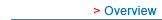
<style>
.page{position:relative;width:162px;height:20px;background:#ffffff}
.page>*{position:absolute;margin:0}
.t1{font:12px "ArialMT";letter-spacing:0.025em;color:#006fad}
.t2{font:12px "ArialMT";letter-spacing:0.025em;color:#ff0000}
</style>
<div class="page">
<p class="t1" style="left:94px;top:6px;width:63px;height:9px"><span class="t2">&gt; </span>Overview</p>
</div>
